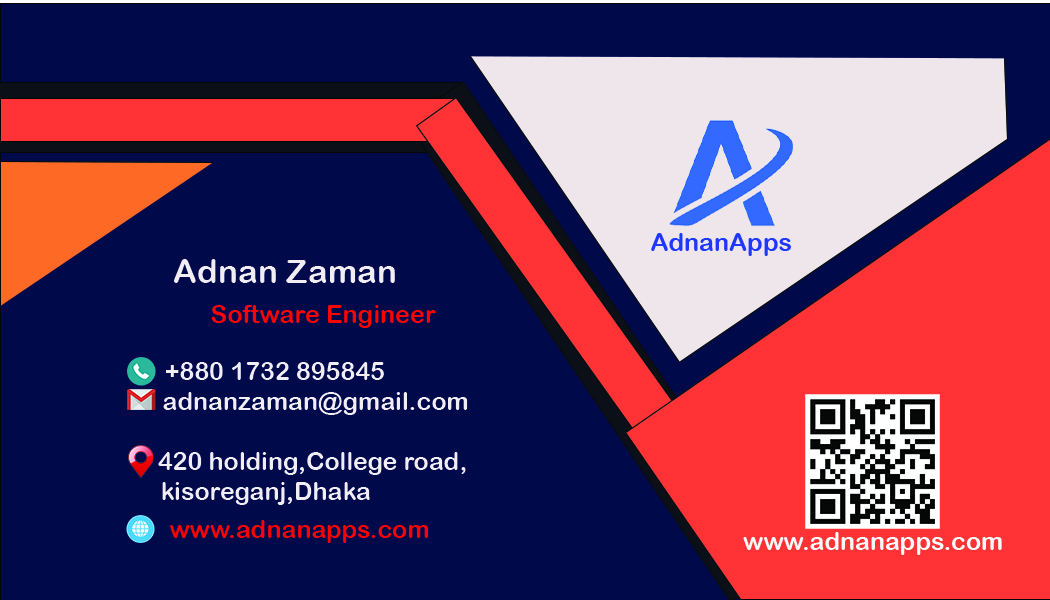
<style>
.page{position:relative;width:1050px;height:600px;background:#00094a}
.page>*{position:absolute;margin:0}
.t1{font:25px "ArialRoundedMTBold";color:#1e37ff}
.t2{font:33.3px "ArialRoundedMTBold";color:#f2edf2}
.t3{font:25px "ArialRoundedMTBold";color:#ff0200}
.t4{font:25px "ArialRoundedMTBold";color:#f2edf2}
.t5{font:25px "ArialRoundedMTBold";color:#ff0000}
.t6{font:25px "ArialRoundedMTBold";color:#fafbfb}
</style>
<div class="page">
<p class="t1" style="left:651px;top:233px;width:140px;height:23px">AdnanApps</p>
<p class="t2" style="left:173px;top:259px;width:222px;height:24px">Adnan Zaman</p>
<p class="t3" style="left:211px;top:305px;width:225px;height:23px">Software Engineer</p>
<p class="t4" style="left:158px;top:362px;width:310px;height:143px;text-align:center">+880 1732 895845<br>                   adnanzaman@gmail.com<br><br>                  420 holding,College road,<br>   kisoreganj,Dhaka</p>
<p class="t5" style="left:170px;top:520px;width:259px;height:23px">www.adnanapps.com</p>
<p class="t6" style="left:743px;top:532px;width:259px;height:23px">www.adnanapps.com</p>
</div>
